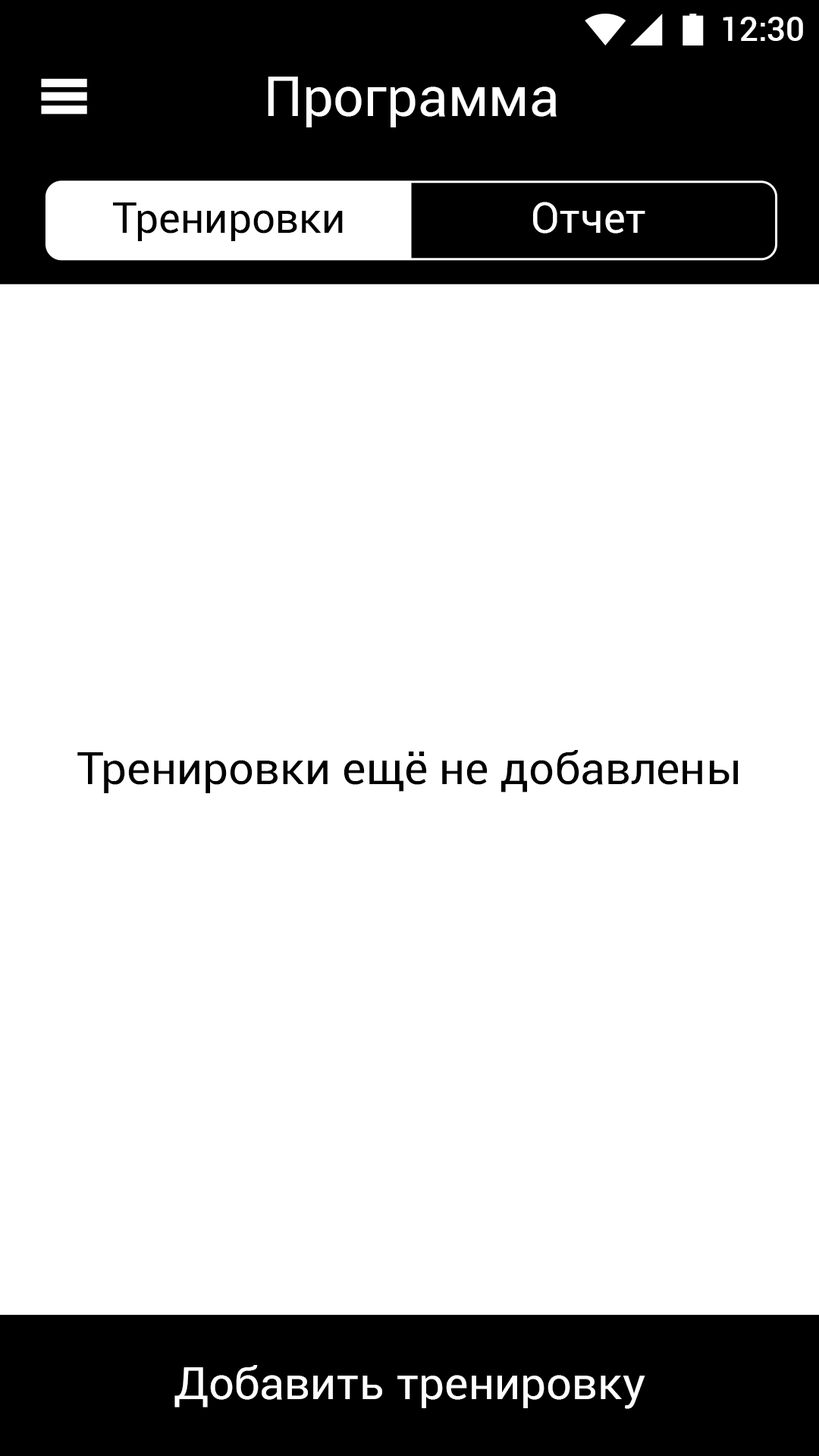
<style>
.page{position:relative;width:819px;height:1456px;background:#ffffff}
.page>*{position:absolute;margin:0}
.t1{font:33.4px "Roboto-Medium";color:#ffffff}
.t2{font:54.6px "Roboto-Regular";color:#ffffff}
.t3{font:41.7px "Roboto-Regular";color:#000000}
.t4{font:41.7px "Roboto-Regular";color:#ffffff}
.t5{font:45.5px "Roboto-Regular";color:#000000}
.t6{font:45.5px "Roboto-Regular";color:#ffffff}
</style>
<div class="page">
<p class="t1" style="left:723px;top:17px;width:80px;height:24px">12:30</p>
<p class="t2" style="left:268px;top:77px;width:289px;height:50px">Программа</p>
<p class="t3" style="left:113px;top:202px;width:230px;height:39px">Тренировки</p>
<p class="t4" style="left:533px;top:202px;width:112px;height:32px">Отчет</p>
<p class="t5" style="left:77px;top:750px;width:661px;height:43px">Тренировки ещё не добавлены</p>
<p class="t6" style="left:174px;top:1365px;width:471px;height:44px">Добавить тренировку</p>
</div>
